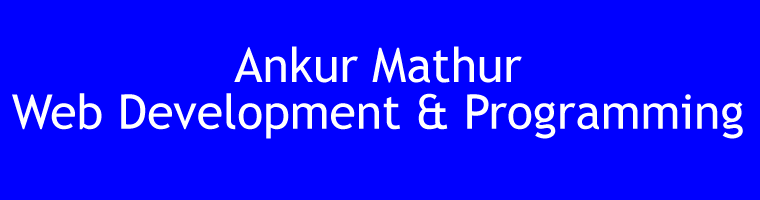
<style>
.page{position:relative;width:760px;height:200px;background:#0000ff}
.page>*{position:absolute;margin:0}
.t1{font:48px/15.6px "TrebuchetMS";color:#ffffff}
</style>
<div class="page">
<p class="t1" style="left:12px;top:46px;width:731px;height:93px;text-align:center">Ankur Mathur<br><br><br>Web Development &amp; Programming</p>
</div>
